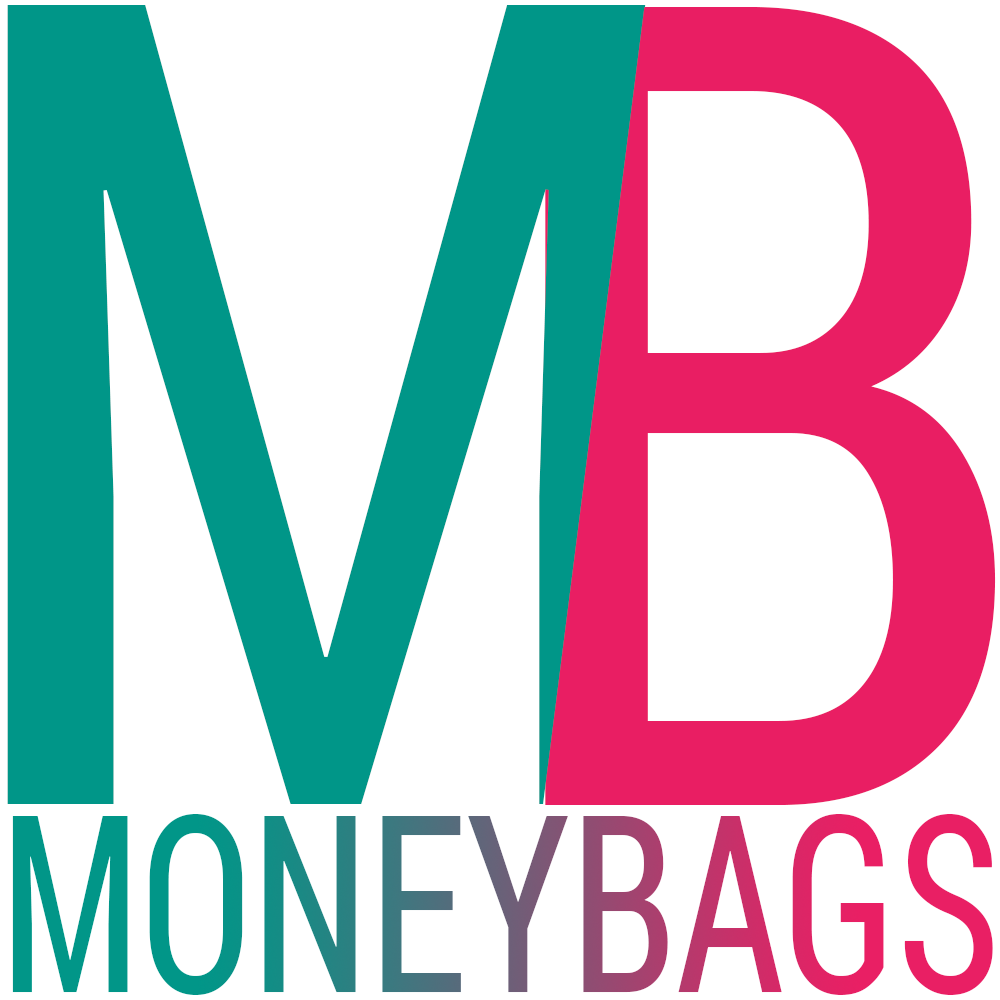
<style>
.page{position:relative;width:1000px;height:1000px;background:#ffffff}
.page>*{position:absolute;margin:0}
.t1{font:246.8px "RobotoCondensed-Regular";scale:0.79 1}
</style>
<div class="page">
<p class="t1" style="left:12px;top:814px;width:981px;height:181px">MONEYBAGS</p>
</div>
